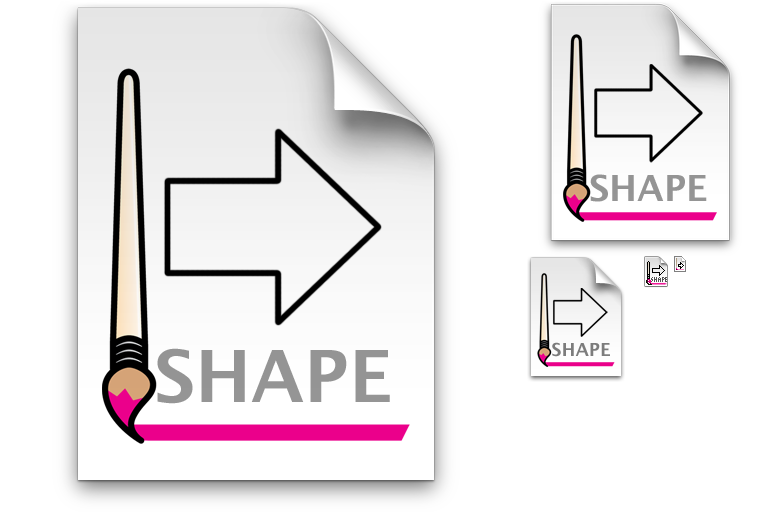
<style>
.page{position:relative;width:768px;height:512px;background:#ffffff}
.page>*{position:absolute;margin:0}
.t1{font:36px "LucidaGrande-Bold";color:#959595}
.t2{font:18px "LucidaGrande-Bold";color:#7d7d7d}
.t3{font:72px "LucidaGrande-Bold";color:#959595}
</style>
<div class="page">
<p class="t1" style="left:590px;top:174px;width:117px;height:28px">SHAPE</p>
<p class="t2" style="left:552px;top:342px;width:58px;height:15px">SHAPE</p>
<p class="t3" style="left:157px;top:348px;width:233px;height:56px">SHAPE</p>
</div>
